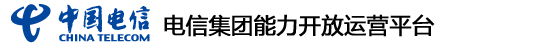
<style>
.page{position:relative;width:550px;height:50px;background:#ffffff}
.page>*{position:absolute;margin:0}
.t1{font:22px "MicrosoftYaHei";color:#000000;font-weight:bold}
</style>
<div class="page">
<p class="t1" style="left:164px;top:14px;width:271px;height:23px">电信集团能力开放运营平台</p>
</div>
